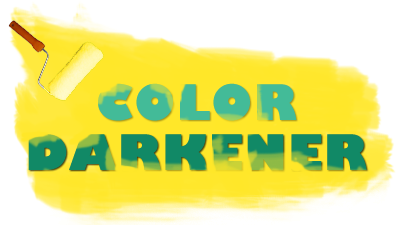
<style>
.page{position:relative;width:396px;height:225px;background:#ffffff}
.page>*{position:absolute;margin:0}
.t1{font:48px "GillSans-UltraBold";letter-spacing:0.025em;color:#43bb98}
.t2{font:48px "GillSans-UltraBold";letter-spacing:0.025em;color:#118966}
</style>
<div class="page">
<p class="t1" style="left:98px;top:83px;width:199px;height:38px">COLOR</p>
<p class="t2" style="left:28px;top:134px;width:339px;height:37px">DARKENER</p>
</div>
